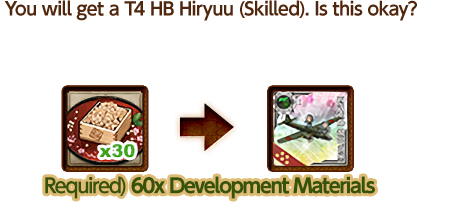
<style>
.page{position:relative;width:450px;height:202px;background:#ffffff}
.page>*{position:absolute;margin:0}
.t1{font:18px "UDShinGoPro-DeBold";letter-spacing:-0.04em;color:#50260d}
.t2{font:20px "UDShinGoPro-Bold";letter-spacing:-0.08em;color:#375309}
.t3{font:20px "UDShinGoPro-DeBold";letter-spacing:-0.08em;color:#375309}
</style>
<div class="page">
<p class="t1" style="left:4px;top:0px;width:413px;height:21px">You will get a T4 HB Hiryuu (Skilled). Is this okay?</p>
<p class="t2" style="left:45px;top:176px;width:330px;height:23px"><span class="t3">Required) </span>60x Development Materials</p>
</div>
